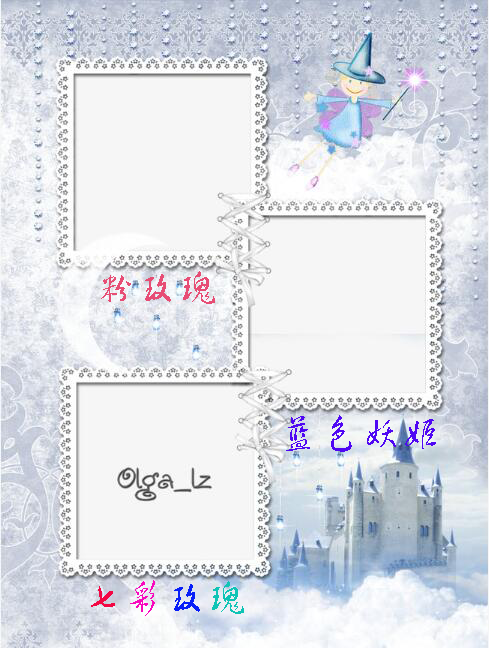
<style>
.page{position:relative;width:489px;height:648px;background:#f6f6f6}
.page>*{position:absolute;margin:0}
.t1{font:40px "FZHCJW--GB1-0";letter-spacing:0.025em;color:#e74d75}
.t2{font:40px "FZHCJW--GB1-0";letter-spacing:0.025em;color:#4f07f3}
.t3{font:40px "FZHCJW--GB1-0";letter-spacing:0.025em;color:#f30744}
.t4{font:40px "FZHCJW--GB1-0";letter-spacing:0.025em;color:#f808bd}
.t5{font:40px "FZHCJW--GB1-0";letter-spacing:0.025em;color:#081ef8}
.t6{font:40px "FZHCJW--GB1-0";letter-spacing:0.025em;color:#0ec4b5}
</style>
<div class="page">
<p class="t1" style="left:101px;top:271px;width:114px;height:33px">粉玫瑰</p>
<p class="t2" style="left:286px;top:415px;width:150px;height:37px">蓝色妖姬</p>
<p class="t3" style="left:91px;top:580px;width:153px;height:36px">七<span class="t4">彩</span><span class="t5">玫</span><span class="t6">瑰</span></p>
</div>
